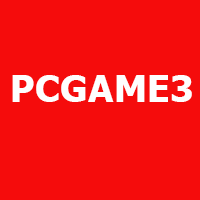
<style>
.page{position:relative;width:200px;height:200px;background:#f50c0c}
.page>*{position:absolute;margin:0}
.t1{font:37.5px "Tahoma-Bold";color:#fefefe}
</style>
<div class="page">
<p class="t1" style="left:12px;top:75px;width:180px;height:27px">PCGAME3</p>
</div>
